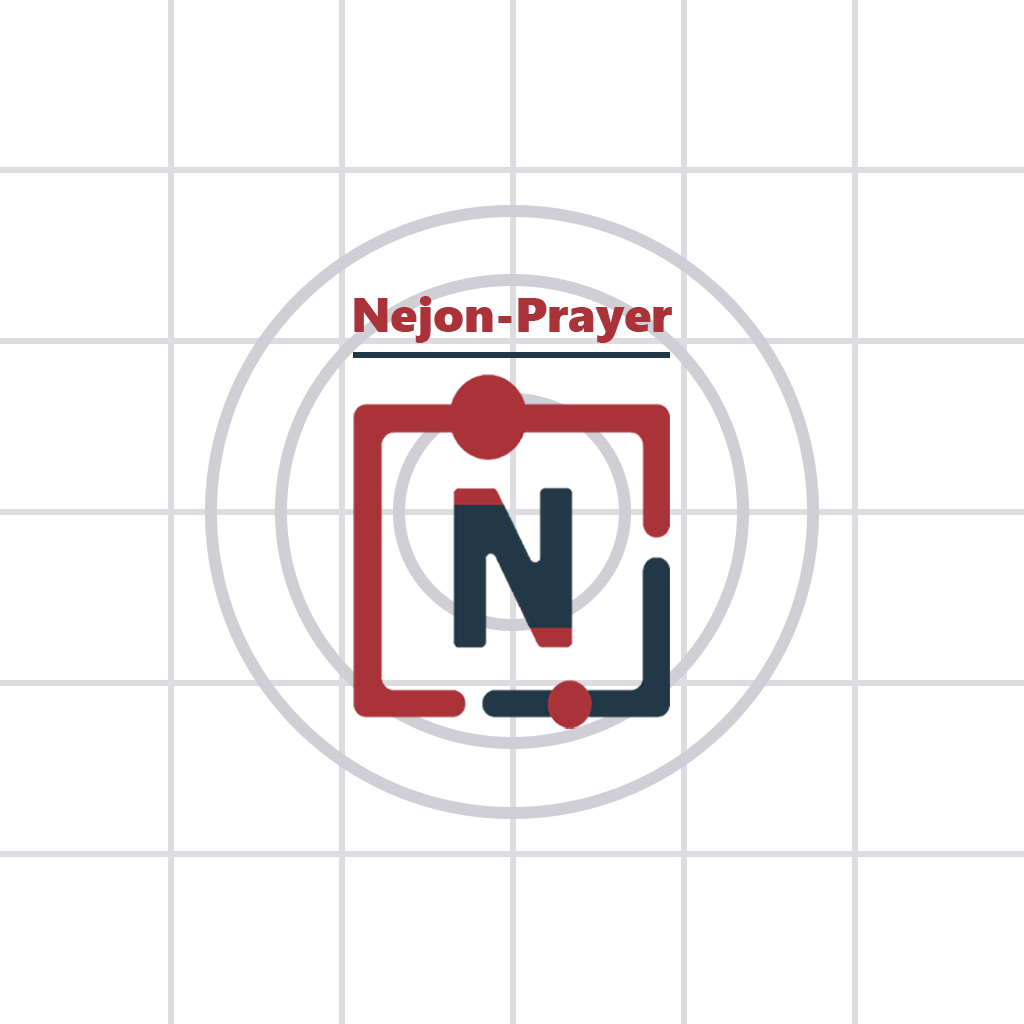
<style>
.page{position:relative;width:1024px;height:1024px;background:#ffffff}
.page>*{position:absolute;margin:0}
.t1{font:49px "SegoeUIBlack";color:#a93339}
</style>
<div class="page">
<p class="t1" style="left:354px;top:296px;width:318px;height:47px">Nejon-Prayer</p>
</div>
